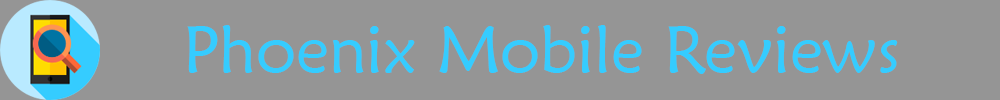
<style>
.page{position:relative;width:1000px;height:100px;background:#959595}
.page>*{position:absolute;margin:0}
.t1{font:66.7px "MaiandraGD-Regular";color:#35ccff}
</style>
<div class="page">
<p class="t1" style="left:187px;top:25px;width:711px;height:49px">Phoenix Mobile Reviews</p>
</div>
